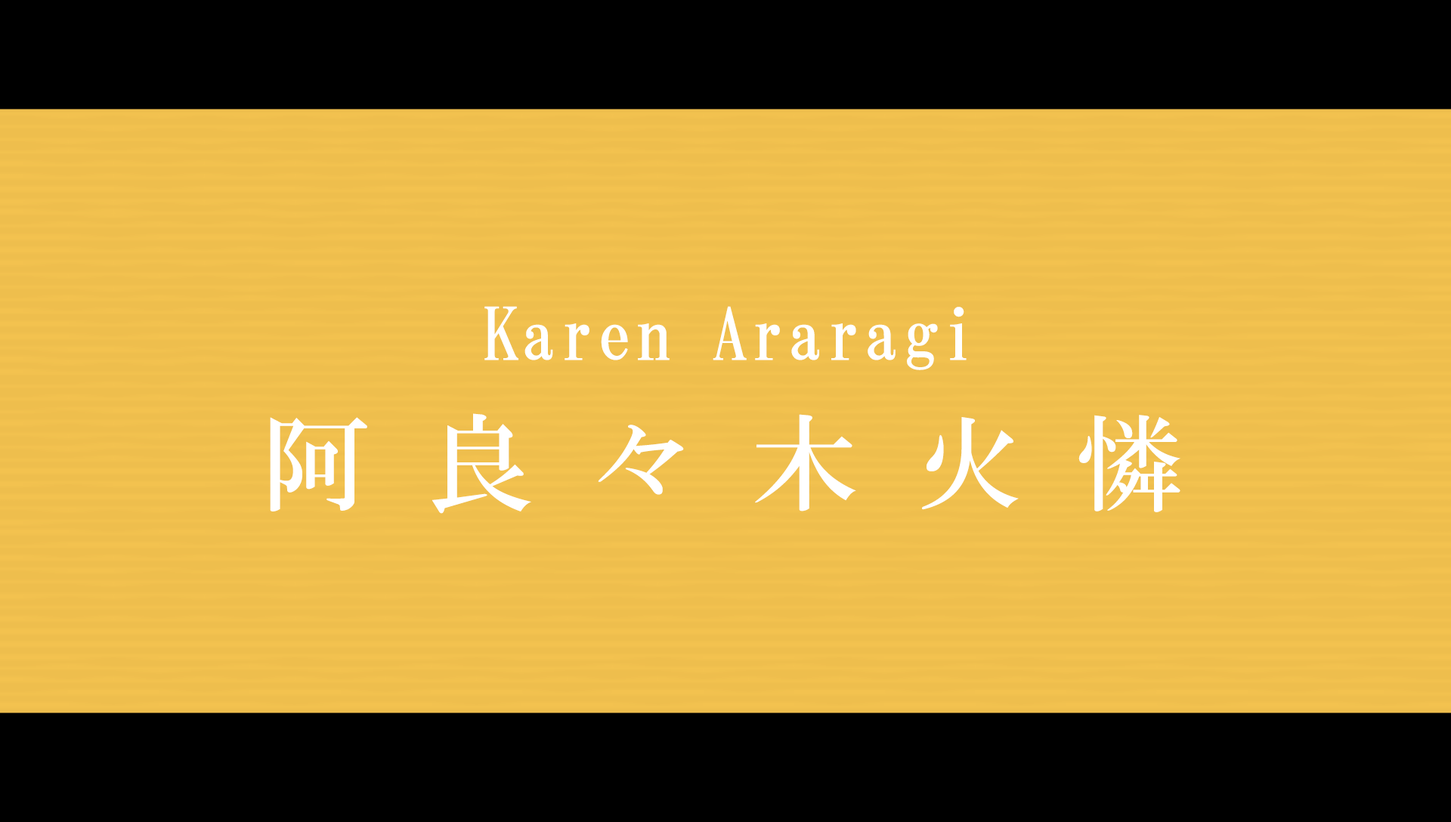
<style>
.page{position:relative;width:1451px;height:822px;background:#eebe4d}
.page>*{position:absolute;margin:0}
.t1{font:72.5px "HGMinchoB";letter-spacing:0.025em;color:#ffffff}
.t2{font:105.8px "HGMinchoB";letter-spacing:0.54em;color:#ffffff}
</style>
<div class="page">
<p class="t1" style="left:484px;top:306px;width:482px;height:64px">Karen Araragi</p>
<p class="t2" style="left:270px;top:413px;width:910px;height:101px">阿良々木火憐</p>
</div>
